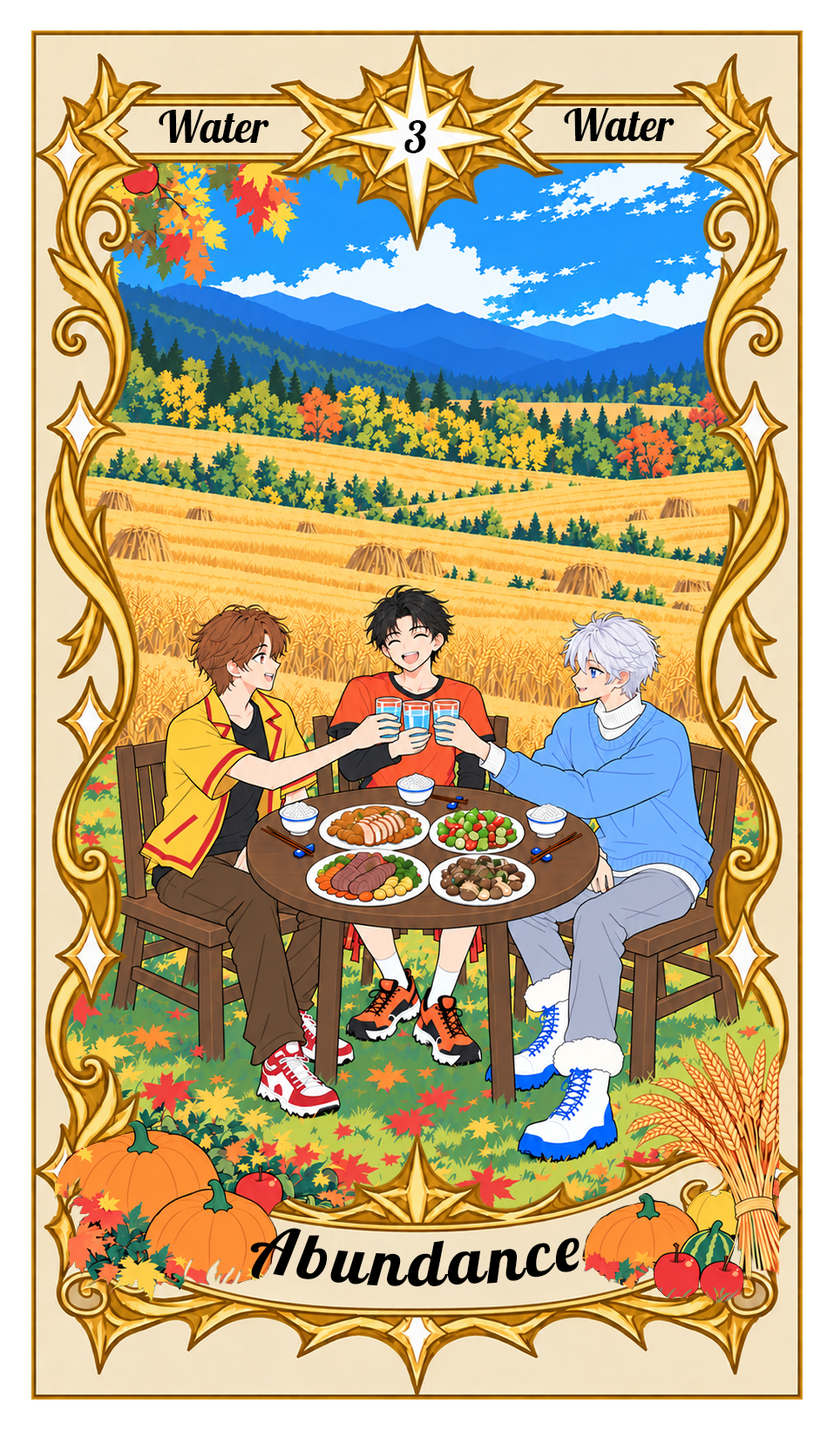
<style>
.page{position:relative;width:834px;height:1430px}
.page>*{position:absolute;margin:0}
.t1{font:43.6px "Lobster-Regular";color:#000000}
.t2{font:65.3px "Lobster-Regular";letter-spacing:0.05em;color:#000000}
</style>
<div class="page">
<p class="t1" style="left:159px;top:110px;width:110px;height:33px">Water</p>
<p class="t1" style="left:564px;top:108px;width:110px;height:33px">Water</p>
<p class="t1" style="left:404px;top:120px;width:22px;height:33px">3</p>
<p class="t2" style="left:250px;top:1228px;width:329px;height:60px">Abundance</p>
</div>
